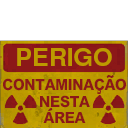
<style>
.page{position:relative;width:128px;height:128px;background:#ffffff}
.page>*{position:absolute;margin:0}
.t1{font:24.8px "Helvetica-Narrow-Bold";color:#bd9a00;scale:1.23 1}
.t2{font:15.5px "MHeiPRC-Xbold";letter-spacing:-0.02em;color:#8c1818;scale:0.93 1}
.t3{font:14.3px "URWBookman-Demi";letter-spacing:-0.02em;color:#8c1818;font-weight:bold;scale:0.93 1}
.t4{font:17.7px "URWBookman-Demi";letter-spacing:-0.02em;color:#8c1818;scale:0.9 1}
</style>
<div class="page">
<p class="t1" style="left:17px;top:48px;width:95px;height:18px">PERIGO</p>
<p class="t2" style="left:3px;top:78px;width:123px;height:13px">CONTAMINACAO</p>
<p class="t3" style="left:106px;top:75px;width:8px;height:3px">~</p>
<p class="t2" style="left:40px;top:95px;width:50px;height:13px">NESTA</p>
<p class="t2" style="left:43px;top:112px;width:43px;height:11px">AREA</p>
<p class="t4" style="left:48px;top:108px;width:5px;height:4px">´</p>
</div>
